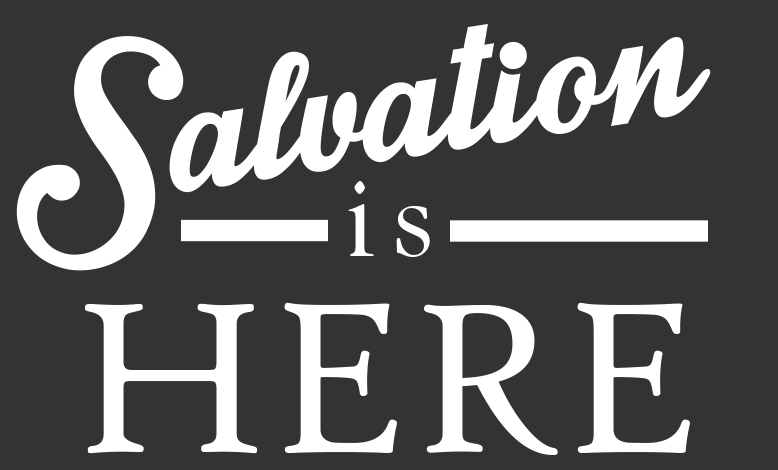
<style>
.page{position:relative;width:778px;height:470px;background:#333333}
.page>*{position:absolute;margin:0}
.t1{font:281.2px "IntriqueScriptPersonalUse";color:#ffffff}
.t2{font:123px "GoudyOldStyleT-Regular";letter-spacing:0.14em;color:#ffffff}
.t3{font:229.7px "HighTowerText-Reg";color:#ffffff}
</style>
<div class="page">
<p class="t1" style="left:16px;top:24px;width:695px;height:247px;rotate:-9deg">Salvation</p>
<p class="t2" style="left:348px;top:181px;width:82px;height:76px">is</p>
<p class="t3" style="left:85px;top:302px;width:605px;height:153px">HERE</p>
</div>
